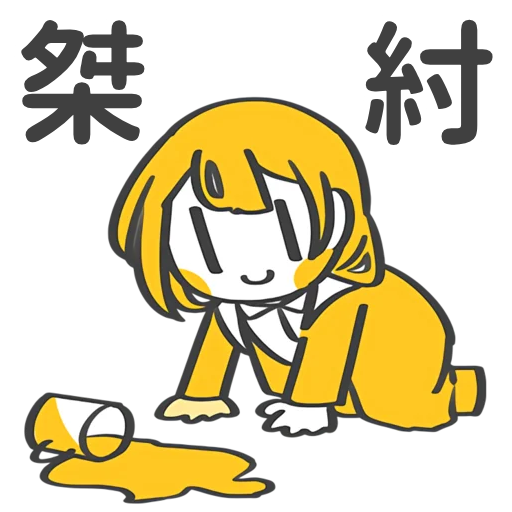
<style>
.page{position:relative;width:512px;height:512px;background:#ffffff}
.page>*{position:absolute;margin:0}
.t1{font:134px "ShangguRoundTC-Bold"}
</style>
<div class="page">
<p class="t1" style="left:11px;top:9px;width:490px;height:145px">桀       紂</p>
</div>
